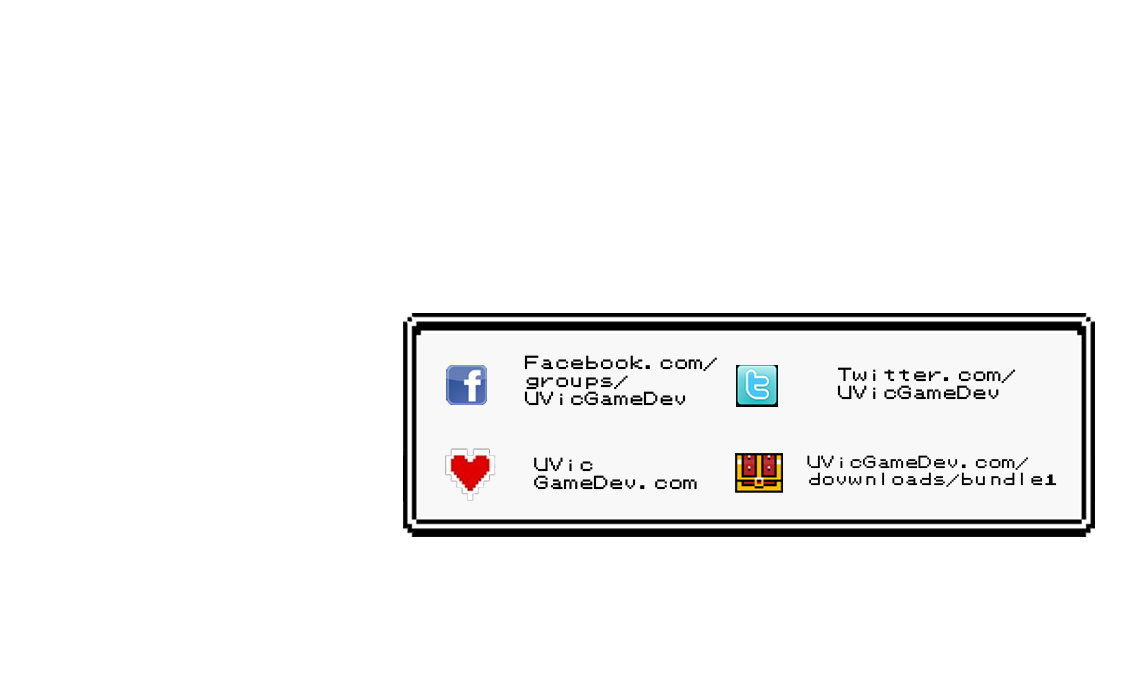
<style>
.page{position:relative;width:1125px;height:675px;background:#ffffff}
.page>*{position:absolute;margin:0}
.t1{font:15px "PokemonGB";color:#000000}
.t2{font:14px "PokemonGB";color:#000000}
</style>
<div class="page">
<p class="t1" style="left:524px;top:355px;width:193px;height:51px">Facebook.com/<br>groups/<br>UVicGameDev</p>
<p class="t1" style="left:837px;top:367px;width:179px;height:33px">Twitter.com/<br>UVicGameDev</p>
<p class="t1" style="left:534px;top:457px;width:163px;height:33px">UVic<br>GameDev.com</p>
<p class="t2" style="left:807px;top:455px;width:250px;height:32px">UVicGameDev.com/<br>dovwnloads/bundle1</p>
</div>
